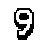
<style>
.page{position:relative;width:48px;height:48px;background:#ffffff}
.page>*{position:absolute;margin:0}
.t1{font:36px "KarmaFuture-Regular";color:#010101}
</style>
<div class="page">
<p class="t1" style="left:14px;top:8px;width:20px;height:32px">9</p>
</div>
